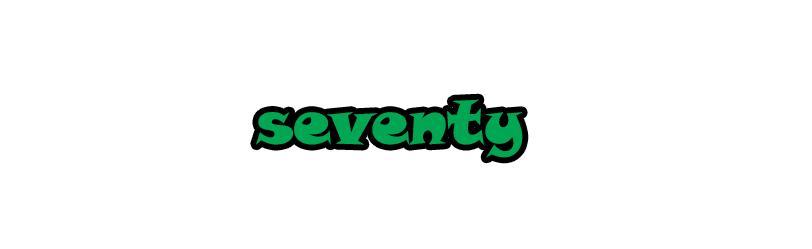
<style>
.page{position:relative;width:812px;height:249px;background:#ffffff}
.page>*{position:absolute;margin:0}
.t1{font:60px "SnapITC-Regular";color:#00a651}
</style>
<div class="page">
<p class="t1" style="left:256px;top:99px;width:267px;height:59px">seventy</p>
</div>
